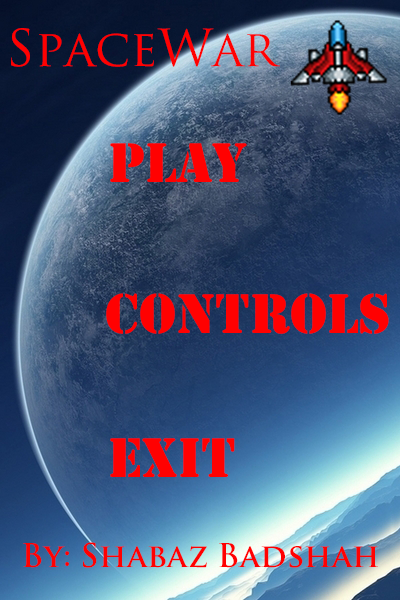
<style>
.page{position:relative;width:400px;height:600px}
.page>*{position:absolute;margin:0}
.t1{font:49.8px "TrajanPro-Regular";color:#ff0101}
.t2{font:58.1px "Stencil";color:#ff0101}
.t3{font:32px "TrajanPro-Bold";color:#ff0101}
</style>
<div class="page">
<p class="t1" style="left:11px;top:28px;width:269px;height:39px">SpaceWar</p>
<p class="t2" style="left:110px;top:143px;width:137px;height:39px">PLAY</p>
<p class="t2" style="left:106px;top:293px;width:283px;height:41px">CONTROLS</p>
<p class="t2" style="left:110px;top:438px;width:125px;height:39px">Exit</p>
<p class="t3" style="left:23px;top:542px;width:355px;height:26px">By: Shabaz Badshah</p>
</div>
